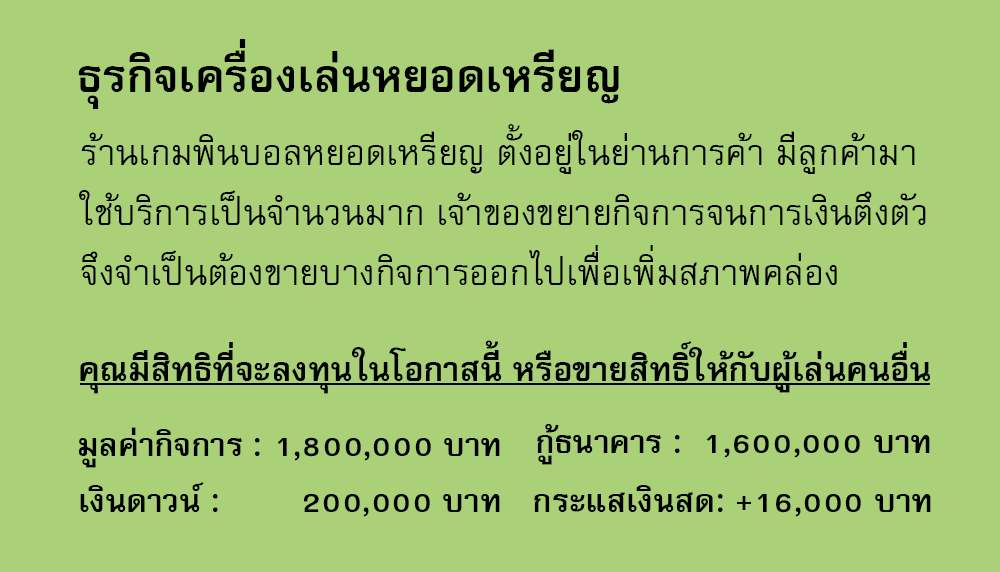
<style>
.page{position:relative;width:1000px;height:572px;background:#aad178}
.page>*{position:absolute;margin:0}
.t1{font:64px "FreesiaUPCBold";color:#000000}
.t2{font:50px/60px "FreesiaUPC";color:#000000}
.t3{font:47px "FreesiaUPCBold";color:#000000}
.t4{font:45px "FreesiaUPCBold";color:#000000}
</style>
<div class="page">
<p class="t1" style="left:78px;top:39px;width:541px;height:70px">ธุรกิจเครื่องเล่นหยอดเหรียญ</p>
<p class="t2" style="left:79px;top:124px;width:847px;height:161px">ร้านเกมพินบอลหยอดเหรียญ ตั้งอยู่ในย่านการค้า มีลูกค้ามา<br>ใช้บริการเป็นจำนวนมาก เจ้าของขยายกิจการจนการเงินตึงตัว<br>จึงจำเป็นต้องขายบางกิจการออกไปเพื่อเพิ่มสภาพคล่อง</p>
<p class="t3" style="left:80px;top:340px;width:851px;height:54px">คุณมีสิทธิที่จะลงทุนในโอกาสนี้ หรือขายสิทธิ์ให้กับผู้เล่นคนอื่น</p>
<p class="t4" style="left:537px;top:424px;width:393px;height:41px">กู้ธนาคาร :  1,600,000 บาท</p>
<p class="t4" style="left:78px;top:427px;width:422px;height:41px">มูลค่ากิจการ : 1,800,000 บาท</p>
<p class="t4" style="left:80px;top:481px;width:420px;height:36px">เงินดาวน์ :        200,000 บาท</p>
<p class="t4" style="left:534px;top:485px;width:397px;height:32px">กระแสเงินสด: +16,000 บาท</p>
</div>
